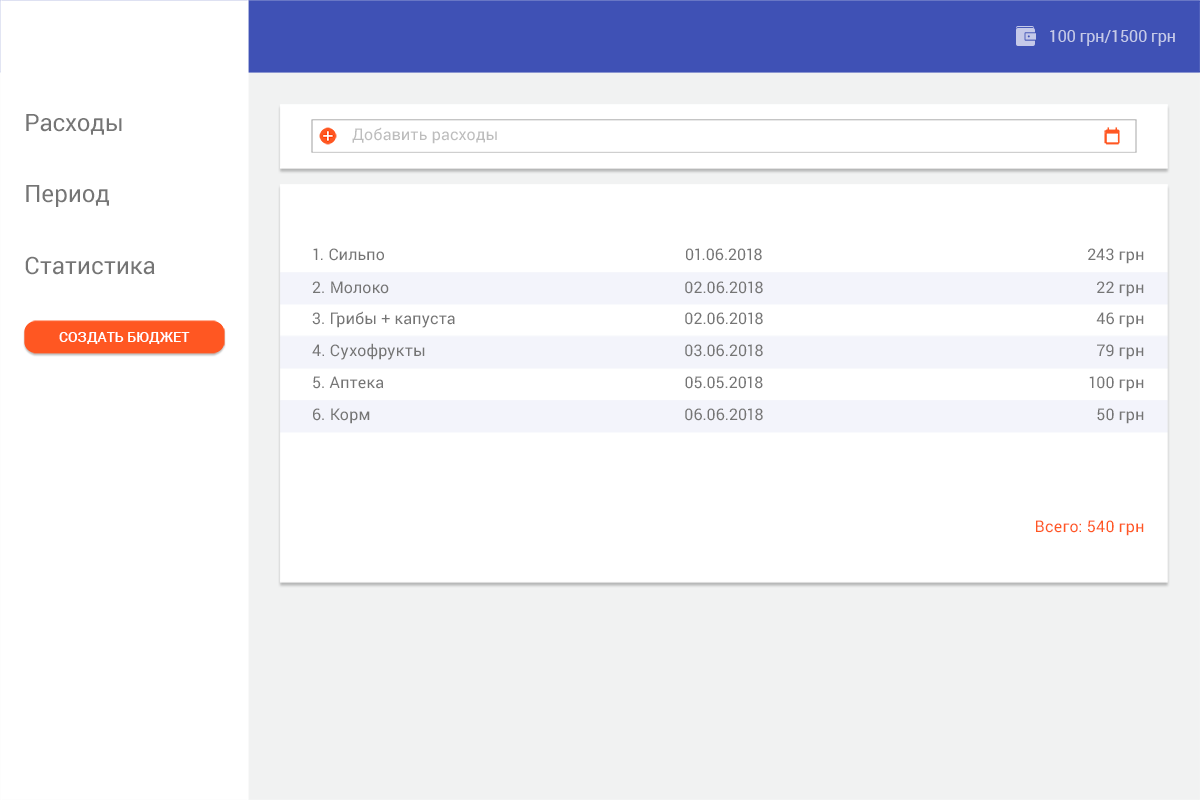
<style>
.page{position:relative;width:1200px;height:800px;background:#ffffff}
.page>*{position:absolute;margin:0}
.t1{font:16px "Roboto-Regular";color:#c5cae9}
.t2{font:24px "Roboto-Regular";color:#757575}
.t3{font:16px "Roboto-Regular";letter-spacing:0.01em;color:#bdbdbd}
.t4{font:16px "Roboto-Regular";letter-spacing:0.01em;color:#757575}
.t5{font:14px "Roboto-Medium";letter-spacing:0.005em;color:#ffffff;text-transform:uppercase}
.t6{font:16px "Roboto-Regular";letter-spacing:0.01em;color:#ff5722}
</style>
<div class="page">
<p class="t1" style="left:1050px;top:30px;width:125px;height:16px">100 грн/1500 грн</p>
<p class="t2" style="left:26px;top:114px;width:96px;height:21px">Расходы</p>
<p class="t3" style="left:352px;top:127px;width:145px;height:17px">Добавить расходы</p>
<p class="t2" style="left:26px;top:185px;width:84px;height:22px">Период</p>
<p class="t2" style="left:25px;top:256px;width:130px;height:19px">Статистика</p>
<p class="t4" style="left:313px;top:248px;width:71px;height:13px">1. Сильпо</p>
<p class="t4" style="left:686px;top:248px;width:76px;height:13px">01.06.2018</p>
<p class="t4" style="left:1088px;top:248px;width:56px;height:16px">243 грн</p>
<p class="t4" style="left:312px;top:281px;width:77px;height:13px">2. Молоко</p>
<p class="t4" style="left:685px;top:281px;width:78px;height:13px">02.06.2018</p>
<p class="t4" style="left:1097px;top:281px;width:47px;height:16px">22 грн</p>
<p class="t4" style="left:312px;top:311px;width:143px;height:17px">3. Грибы + капуста</p>
<p class="t4" style="left:685px;top:312px;width:78px;height:13px">02.06.2018</p>
<p class="t4" style="left:1096px;top:312px;width:48px;height:16px">46 грн</p>
<p class="t5" style="left:59px;top:332px;width:131px;height:12px">создать бюджет</p>
<p class="t4" style="left:312px;top:343px;width:113px;height:17px">4. Сухофрукты</p>
<p class="t4" style="left:685px;top:344px;width:78px;height:13px">03.06.2018</p>
<p class="t4" style="left:1097px;top:344px;width:47px;height:16px">79 грн</p>
<p class="t4" style="left:313px;top:376px;width:71px;height:13px">5. Аптека</p>
<p class="t4" style="left:685px;top:376px;width:78px;height:13px">05.05.2018</p>
<p class="t4" style="left:1089px;top:376px;width:55px;height:16px">100 грн</p>
<p class="t4" style="left:313px;top:408px;width:57px;height:16px">6. Корм</p>
<p class="t4" style="left:685px;top:408px;width:78px;height:13px">06.06.2018</p>
<p class="t4" style="left:1097px;top:408px;width:47px;height:16px">50 грн</p>
<p class="t6" style="left:1036px;top:520px;width:108px;height:16px">Всего: 540 грн</p>
</div>
